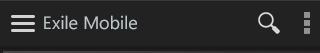
<style>
.page{position:relative;width:320px;height:53px;background:#222222}
.page>*{position:absolute;margin:0}
.t1{font:18px "NirmalaUI";color:#bec8cb}
</style>
<div class="page">
<p class="t1" style="left:44px;top:15px;width:93px;height:15px">Exile Mobile</p>
</div>
